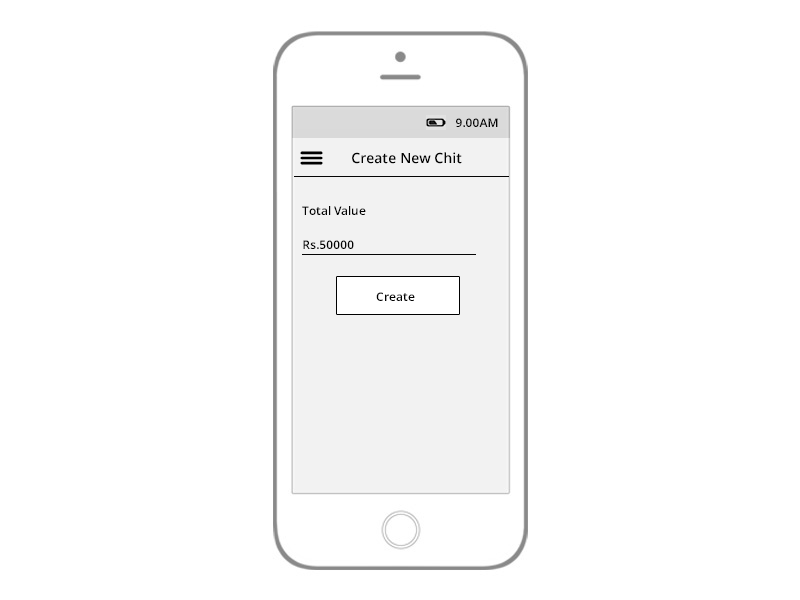
<style>
.page{position:relative;width:800px;height:600px;background:#ffffff}
.page>*{position:absolute;margin:0}
.t1{font:12px "OpenSans-Semibold";color:#030303}
.t2{font:14px "OpenSans-Semibold";color:#030303}
</style>
<div class="page">
<p class="t1" style="left:456px;top:118px;width:42px;height:9px">9.00AM</p>
<p class="t2" style="left:352px;top:152px;width:110px;height:12px">Create New Chit</p>
<p class="t1" style="left:302px;top:206px;width:64px;height:9px">Total Value</p>
<p class="t1" style="left:303px;top:240px;width:51px;height:9px">Rs.50000</p>
<p class="t1" style="left:376px;top:292px;width:39px;height:9px">Create</p>
</div>
